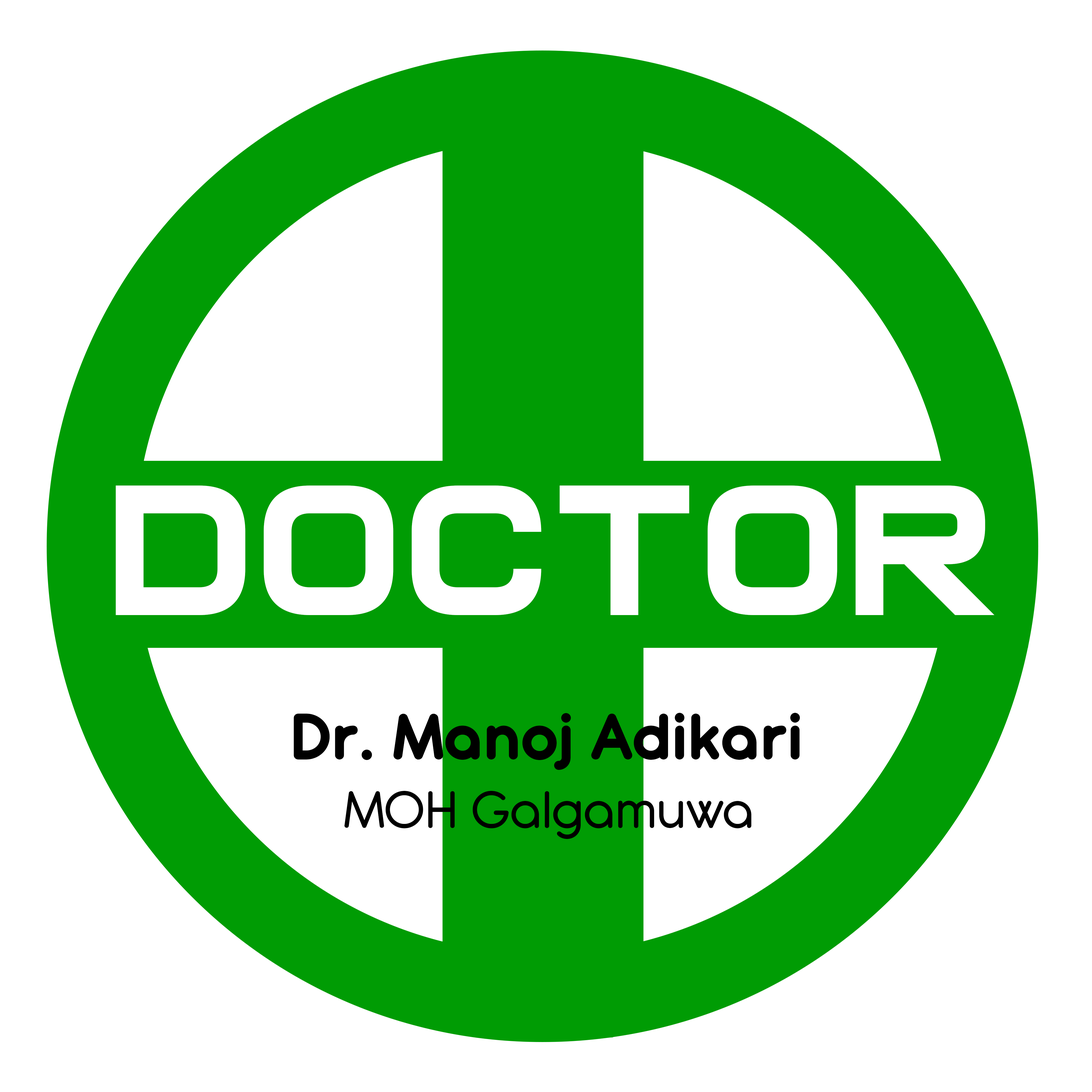
<style>
.page{position:relative;width:1092px;height:1092px;background:#ffffff}
.page>*{position:absolute;margin:0}
.t1{font:189.4px "CasanovaScotia";color:#ffffff}
.t2{font:71.7px "AntipastoPro-Bold";color:#000000}
.t3{font:57.7px "AntipastoPro-Medium";color:#000000}
</style>
<div class="page">
<p class="t1" style="left:116px;top:485px;width:879px;height:130px">DOCTOR</p>
<p class="t2" style="left:294px;top:713px;width:506px;height:57px">Dr. Manoj Adikari</p>
<p class="t3" style="left:344px;top:791px;width:408px;height:48px">MOH Galgamuwa</p>
</div>
